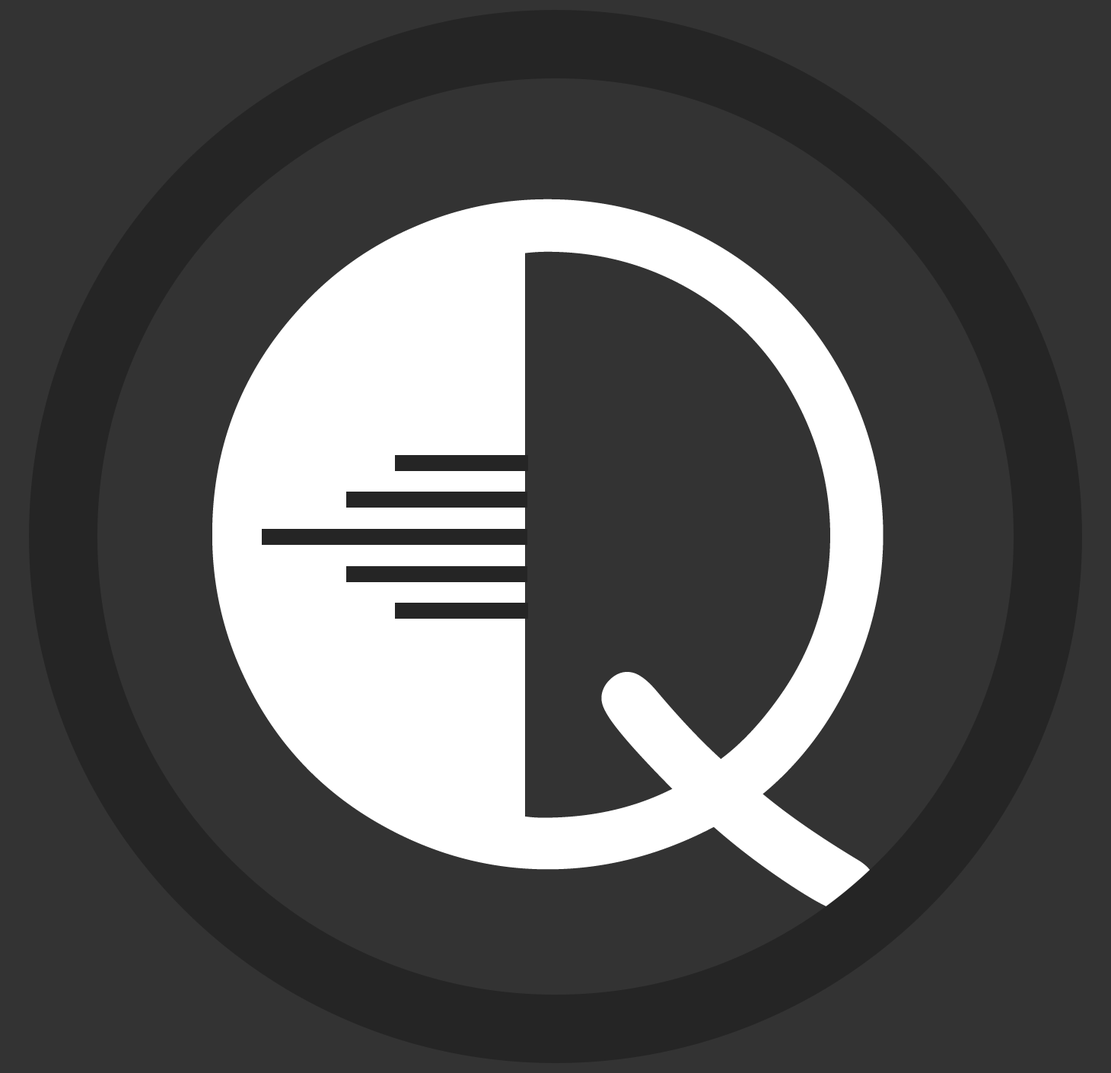
<style>
.page{position:relative;width:1111px;height:1073px;background:#333333}
.page>*{position:absolute;margin:0}
.t1{font:913.3px "Broadway";color:#ffffff;font-weight:bold}
</style>
<div class="page">
<p class="t1" style="left:212px;top:199px;width:672px;height:714px">Q</p>
</div>
